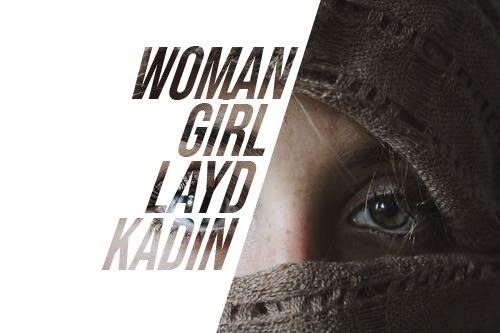
<style>
.page{position:relative;width:500px;height:333px;background:#ffffff}
.page>*{position:absolute;margin:0}
.t1{font:79.7px/60.1px "BebasNeue-Regular";scale:0.85 1}
</style>
<div class="page">
<p class="t1" style="left:101px;top:46px;width:198px;height:224px;text-align:right">WOMAN<br>GİRL<br>LAYD<br>KADIN</p>
</div>
